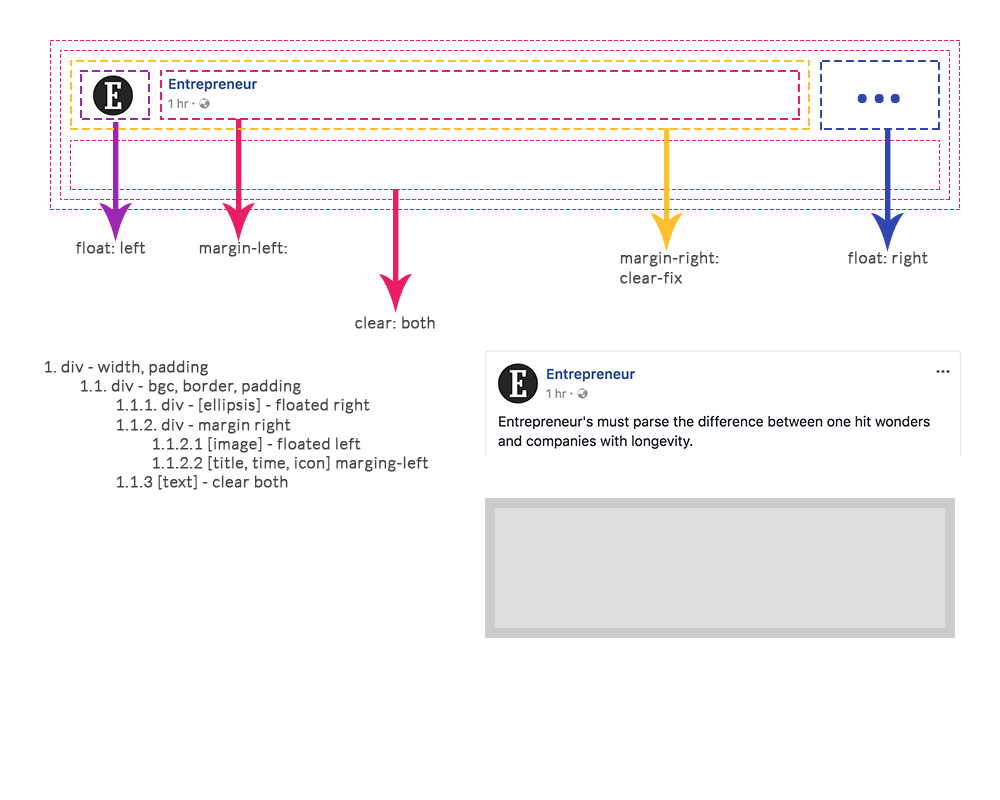
<style>
.page{position:relative;width:1000px;height:800px;background:#ffffff}
.page>*{position:absolute;margin:0}
.t1{font:60px "Slabo27px-Regular";letter-spacing:0.025em;color:#3147ad;font-weight:bold}
.t2{font:16px "Lato-Light";letter-spacing:0.025em;color:#444444;font-weight:bold}
</style>
<div class="page">
<p class="t1" style="left:857px;top:94px;width:43px;height:9px">...</p>
<p class="t2" style="left:75px;top:241px;width:71px;height:13px">float: left</p>
<p class="t2" style="left:199px;top:241px;width:88px;height:16px">margin-left:</p>
<p class="t2" style="left:620px;top:251px;width:99px;height:33px">margin-right:<br>clear-fix</p>
<p class="t2" style="left:847px;top:251px;width:81px;height:16px">float: right</p>
<p class="t2" style="left:355px;top:316px;width:80px;height:13px">clear: both</p>
<p class="t2" style="left:44px;top:360px;width:385px;height:130px">1. div - width, padding <br> 1.1. div - bgc, border, padding<br>  1.1.1. div - [ellipsis] - floated right<br>  1.1.2. div - margin right<br>   1.1.2.1 [image] - floated left<br>   1.1.2.2 [title, time, icon] marging-left<br>  1.1.3 [text] - clear both</p>
</div>
